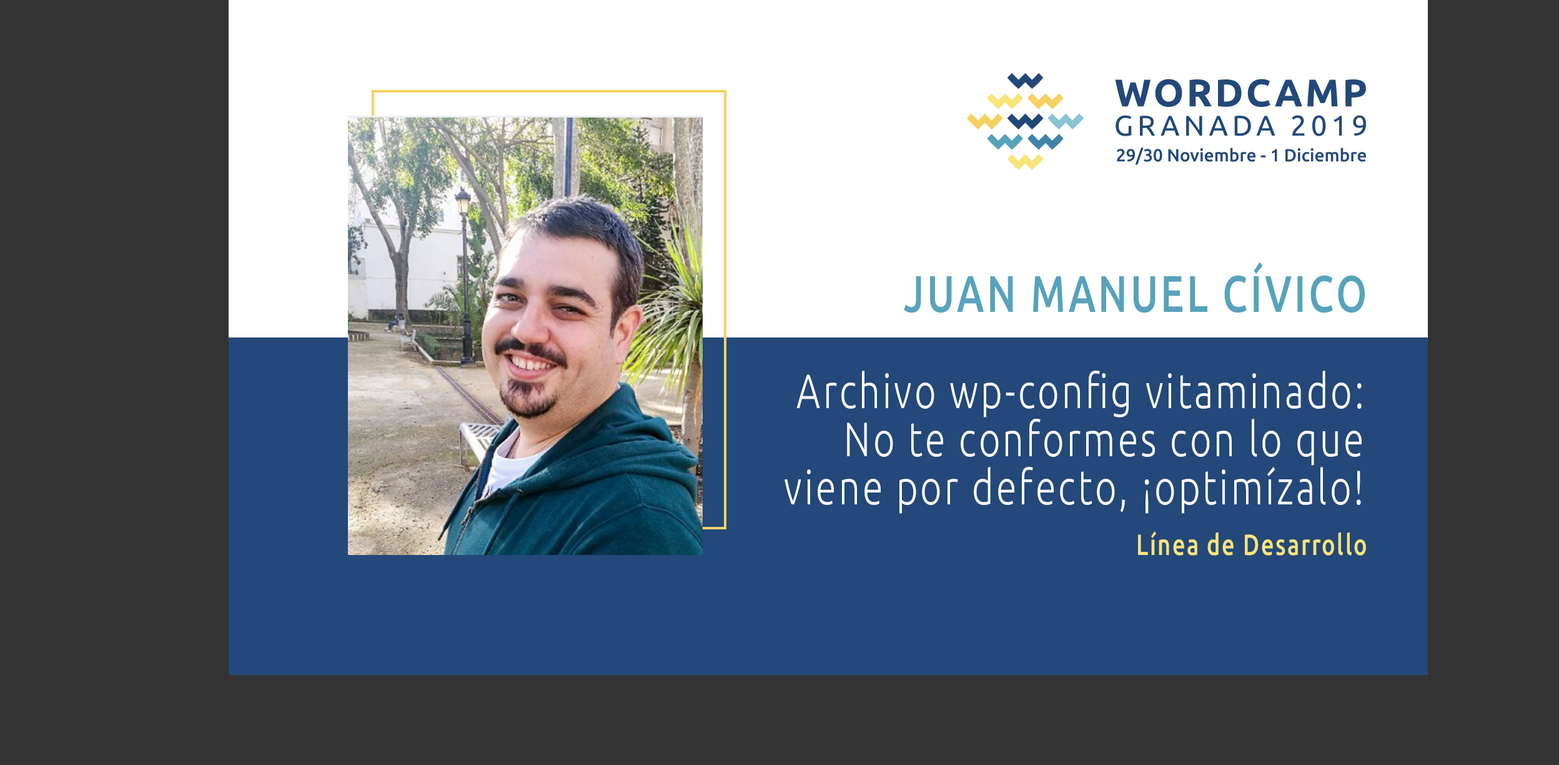
<style>
.page{position:relative;width:1559px;height:765px;background:#333333}
.page>*{position:absolute;margin:0}
.t1{font:51.4px "Ubuntu-Medium";letter-spacing:0.068em;color:#57a3bb;text-transform:uppercase;scale:0.77 1}
.t2{font:48.2px/48.2px "Ubuntu-Light";letter-spacing:0.068em;color:#ffffff;scale:0.77 1}
.t3{font:29.2px "Ubuntu-Medium";letter-spacing:0.068em;color:#f9e37b;scale:0.77 1}
</style>
<div class="page">
<p class="t1" style="left:904px;top:262px;width:461px;height:51px">Juan Manuel Cívico</p>
<p class="t2" style="left:785px;top:370px;width:577px;height:144px;text-align:right">Archivo wp-config vitaminado: No te conformes con lo que viene por defecto, ¡optimízalo!</p>
<p class="t3" style="left:1138px;top:531px;width:228px;height:24px">Línea de Desarrollo</p>
</div>
